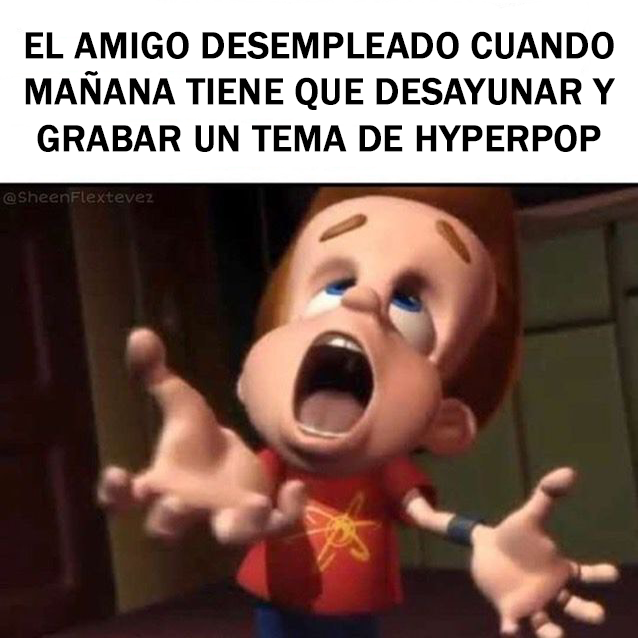
<style>
.page{position:relative;width:638px;height:638px;background:#ffffff}
.page>*{position:absolute;margin:0}
.t1{font:38.8px "FranklinGothic-Medium";color:#000000;font-weight:bold;scale:0.97 1}
</style>
<div class="page">
<p class="t1" style="left:25px;top:31px;width:590px;height:121px;text-align:center">EL AMIGO DESEMPLEADO CUANDO<br>MAÑANA TIENE QUE DESAYUNAR Y<br>GRABAR UN TEMA DE HYPERPOP</p>
</div>
